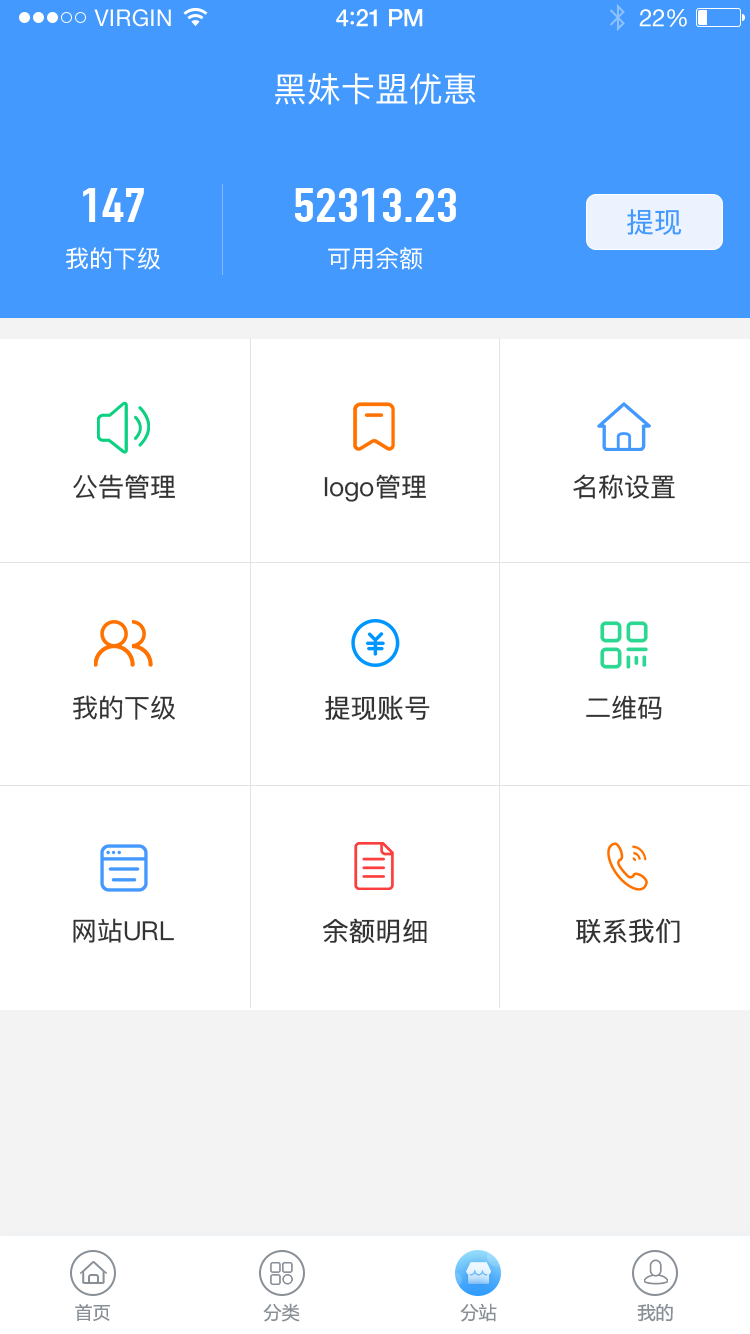
<style>
.page{position:relative;width:750px;height:1334px;background:#ffffff}
.page>*{position:absolute;margin:0}
.t1{font:34px "PingFangSC-Regular";color:#ffffff}
.t2{font:48px "DINCondensed-Bold";color:#ffffff;scale:1.23 1}
.t3{font:28px "PingFangSC-Regular";color:#4399fe}
.t4{font:24px "PingFangSC-Regular";color:#ffffff}
.t5{font:26px "PingFangSC-Regular";color:#333333}
.t6{font:26px "PingFang-SC-Regular";color:#333333;font-weight:bold}
.t7{font:26px "PingFangSC-Regular";color:#333333;text-transform:uppercase}
.t8{font:18px "FZLTHJW--GB1-0";color:#898f96}
.t9{font:18px "MicrosoftYaHei";color:#898f96}
</style>
<div class="page">
<p class="t1" style="left:275px;top:73px;width:201px;height:32px">黑妹卡盟优惠</p>
<p class="t2" style="left:83px;top:188px;width:61px;height:34px">147</p>
<p class="t2" style="left:295px;top:188px;width:161px;height:34px">52313.23</p>
<p class="t3" style="left:627px;top:209px;width:54px;height:26px">提现</p>
<p class="t4" style="left:66px;top:247px;width:94px;height:23px">我的下级</p>
<p class="t4" style="left:328px;top:247px;width:95px;height:23px">可用余额</p>
<p class="t5" style="left:73px;top:474px;width:102px;height:25px">公告管理</p>
<p class="t5" style="left:324px;top:474px;width:102px;height:28px">logo管理</p>
<p class="t5" style="left:573px;top:474px;width:102px;height:25px">名称设置</p>
<p class="t5" style="left:73px;top:695px;width:102px;height:25px">我的下级</p>
<p class="t6" style="left:325px;top:695px;width:105px;height:26px">提现账号</p>
<p class="t5" style="left:586px;top:695px;width:76px;height:25px">二维码</p>
<p class="t7" style="left:73px;top:918px;width:101px;height:25px"><span class="t5">网站</span>url</p>
<p class="t6" style="left:323px;top:918px;width:104px;height:26px">余额明细</p>
<p class="t6" style="left:576px;top:918px;width:104px;height:26px">联系我们</p>
<p class="t8" style="left:75px;top:1304px;width:35px;height:17px">首页</p>
<p class="t9" style="left:263px;top:1303px;width:37px;height:19px">分类</p>
<p class="t9" style="left:460px;top:1303px;width:37px;height:19px">分站</p>
<p class="t9" style="left:637px;top:1303px;width:36px;height:19px">我的</p>
</div>
